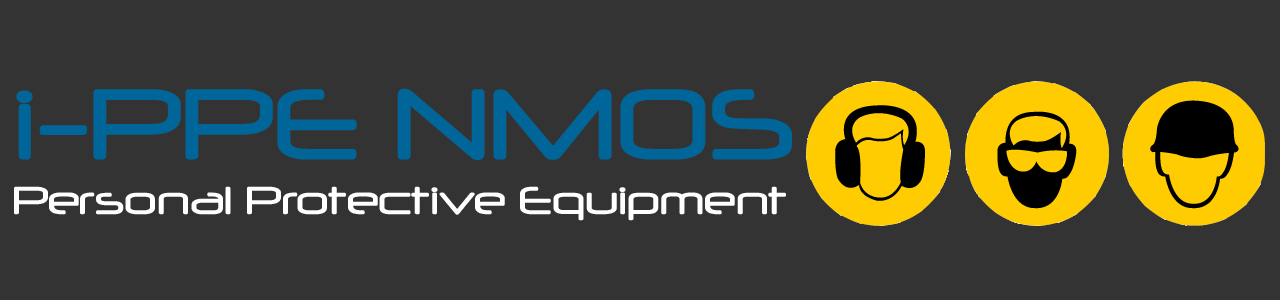
<style>
.page{position:relative;width:1280px;height:300px;background:#333333}
.page>*{position:absolute;margin:0}
.t1{font:46px "Neuropol";color:#ffffff}
.t2{font:118px "Neuropol";color:#006699}
</style>
<div class="page">
<p class="t1" style="left:14px;top:88px;width:778px;height:133px"><span class="t2">i-PPE NMOS<br></span>Personal Protective Equipment</p>
</div>
